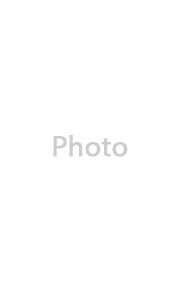
<style>
.page{position:relative;width:180px;height:292px;background:#ffffff}
.page>*{position:absolute;margin:0}
.t1{font:29.2px "MyriadPro-Regular";color:#cccccc;font-weight:bold}
</style>
<div class="page">
<p class="t1" style="left:53px;top:135px;width:75px;height:22px">Photo</p>
</div>
